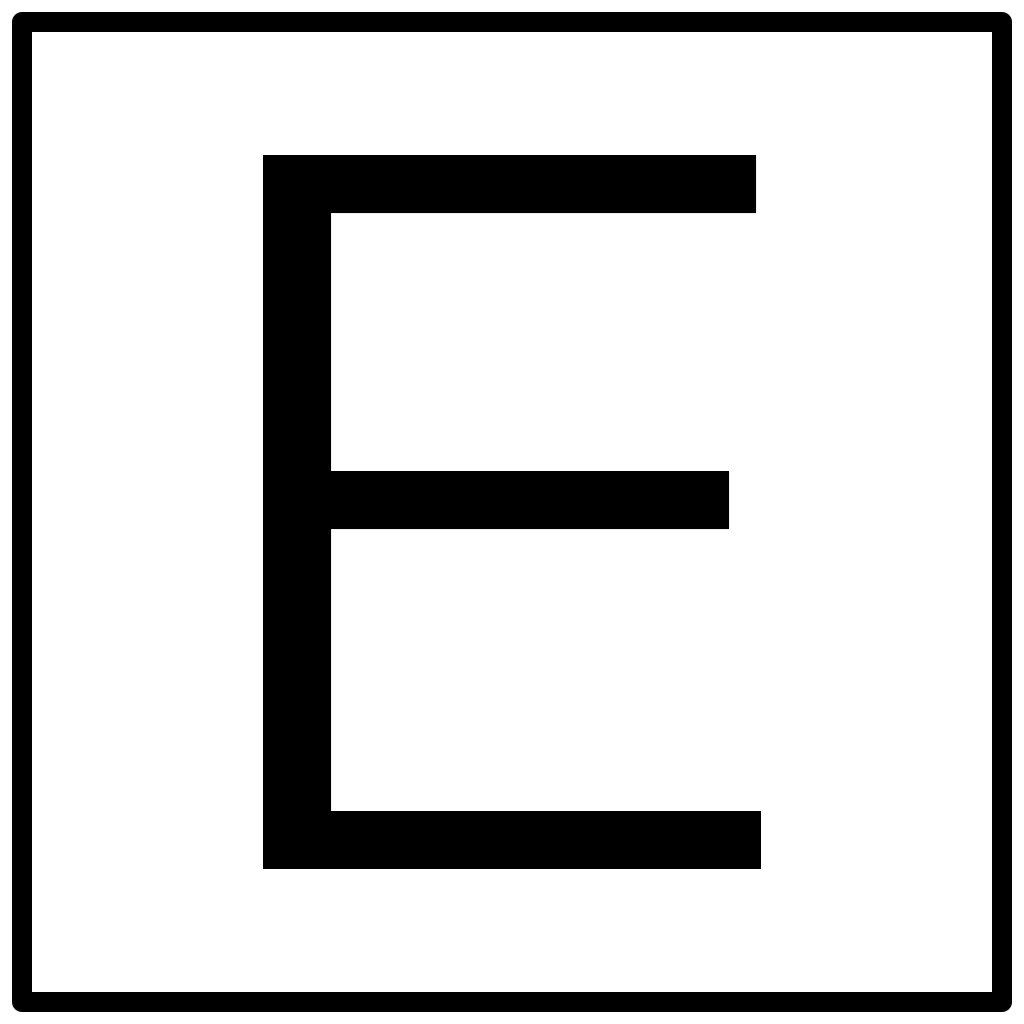
<style>
.page{position:relative;width:1024px;height:1024px;background:#ffffff}
.page>*{position:absolute;margin:0}
.t1{font:1000px "HelveticaNeue-Light";color:#000000}
</style>
<div class="page">
<p class="t1" style="left:263px;top:155px;width:498px;height:714px">E</p>
</div>
